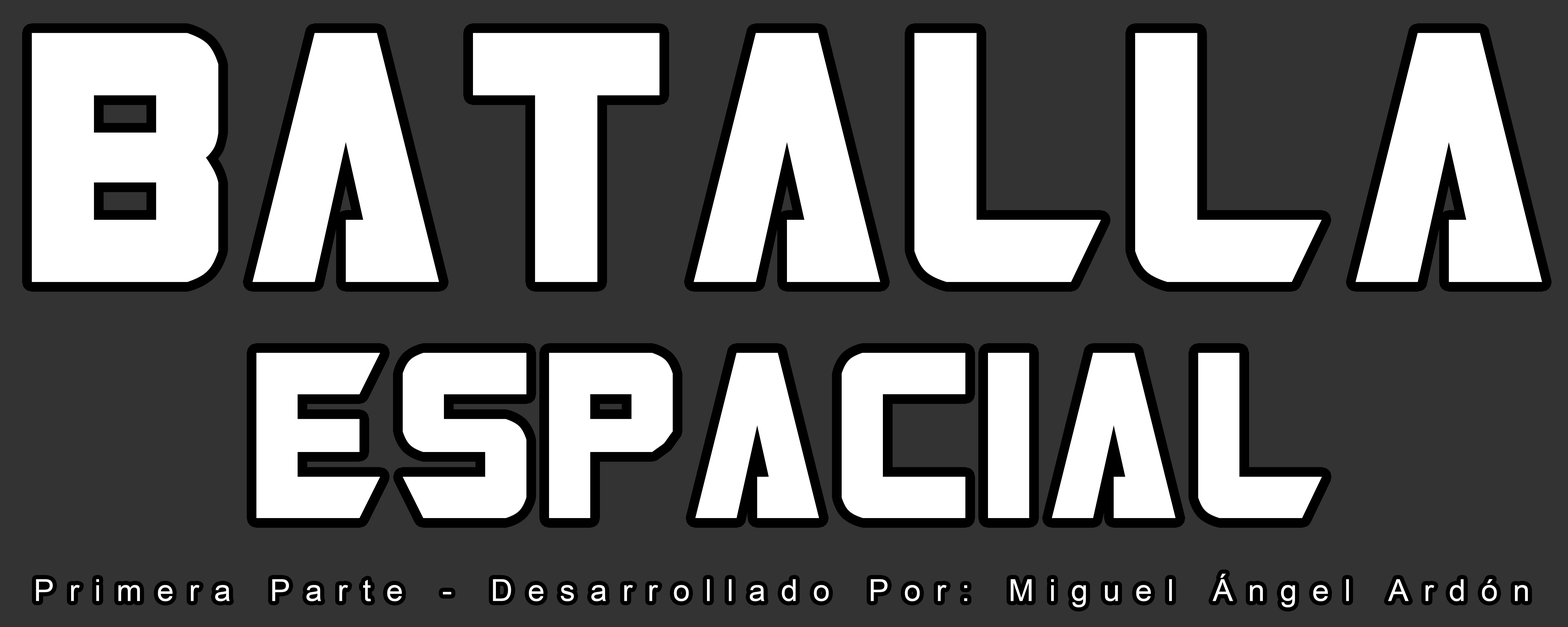
<style>
.page{position:relative;width:1568px;height:627px;background:#333333}
.page>*{position:absolute;margin:0}
.t1{font:207.5px "Transformers";letter-spacing:0.14em;color:#ffffff}
.t2{font:137.7px "Transformers";letter-spacing:0.14em;color:#ffffff}
.t3{font:30.4px "ArialMT";letter-spacing:0.5em;color:#ffffff}
</style>
<div class="page">
<p class="t1" style="left:32px;top:33px;width:1510px;height:249px">BATALLA</p>
<p class="t2" style="left:256px;top:353px;width:1066px;height:165px">ESPACIAL</p>
<p class="t3" style="left:36px;top:574px;width:1492px;height:34px">Primera Parte - Desarrollado Por: Miguel Ángel Ardón</p>
</div>
